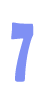
<style>
.page{position:relative;width:50px;height:110px;background:#ffffff}
.page>*{position:absolute;margin:0}
.t1{font:96px "BerlinSansFBDemi-Bold";color:#7f90f4;scale:0.5 1}
</style>
<div class="page">
<p class="t1" style="left:11px;top:22px;width:23px;height:60px">7</p>
</div>
